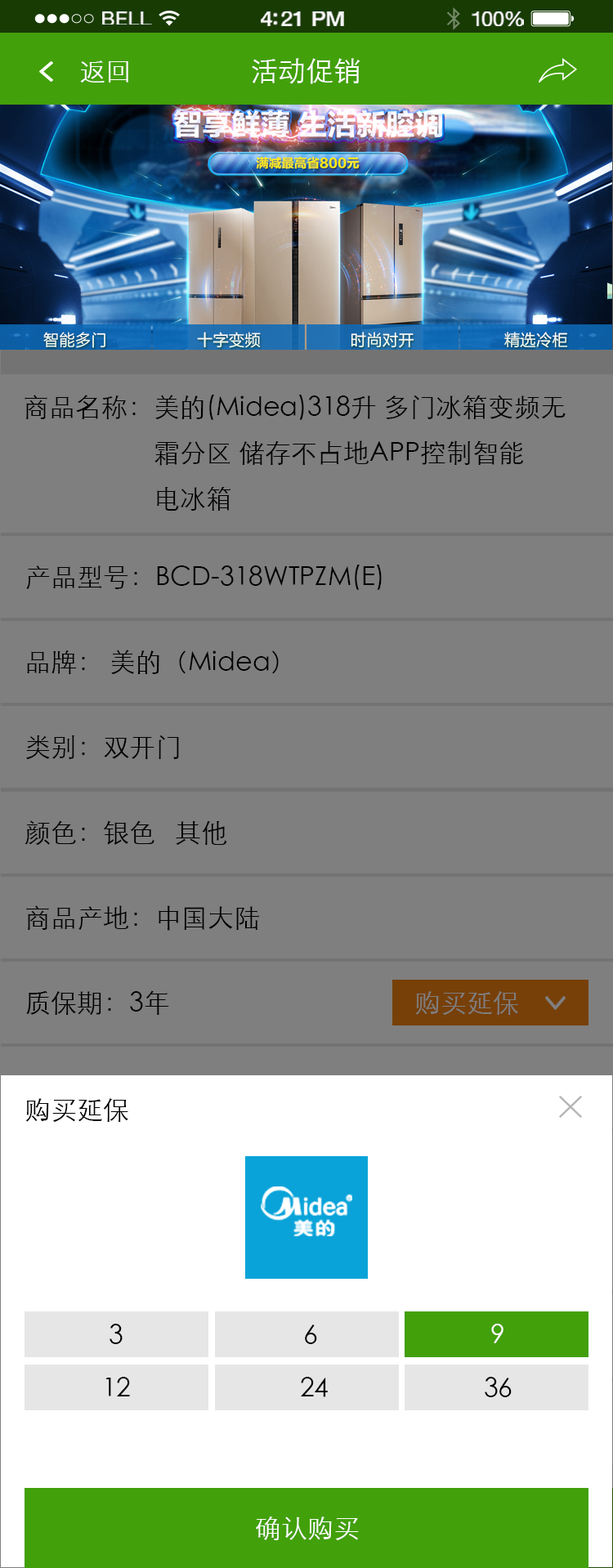
<style>
.page{position:relative;width:613px;height:1568px;background:#7f7f7f}
.page>*{position:absolute;margin:0}
.t1{font:19px "HelveticaNeue";letter-spacing:0.02em;color:#ffffff;scale:1.06 1}
.t2{font:20.7px "HelveticaNeue-Medium";letter-spacing:-0.02em;color:#ffffff;scale:1.06 1}
.t3{font:19.8px "HelveticaNeue";letter-spacing:-0.02em;color:#ffffff;scale:1.06 1}
.t4{font:26.1px "STXihei";color:#ffffff}
.t5{font:27.8px "STXihei";color:#ffffff}
.t6{font:26.1px/45.8px "STXihei";color:#000000}
.t7{font:26.1px "STXihei";color:#000000}
.t8{font:26.1px "STXihei";color:#7f7f7f}
</style>
<div class="page">
<p class="t1" style="left:102px;top:11px;width:50px;height:14px">BELL</p>
<p class="t2" style="left:261px;top:11px;width:83px;height:15px">4:21 PM</p>
<p class="t3" style="left:471px;top:11px;width:53px;height:15px">100%</p>
<p class="t4" style="left:80px;top:60px;width:48px;height:23px">返回</p>
<p class="t5" style="left:252px;top:58px;width:108px;height:26px">活动促销</p>
<p class="t6" style="left:25px;top:395px;width:540px;height:116px">商品名称：美的(Midea)318升 多门冰箱变频无<br>                    霜分区 储存不占地APP控制智能<br>                    电冰箱</p>
<p class="t7" style="left:26px;top:565px;width:356px;height:25px">产品型号：BCD-318WTPZM(E)</p>
<p class="t7" style="left:27px;top:650px;width:252px;height:25px">品牌： 美的（Midea）</p>
<p class="t7" style="left:26px;top:735px;width:153px;height:25px">类别：双开门</p>
<p class="t7" style="left:25px;top:820px;width:202px;height:26px">颜色：银色   其他</p>
<p class="t7" style="left:26px;top:905px;width:233px;height:26px">商品产地：中国大陆</p>
<p class="t7" style="left:26px;top:990px;width:143px;height:25px">质保期：3年</p>
<p class="t8" style="left:415px;top:991px;width:103px;height:24px">购买延保</p>
<p class="t7" style="left:25px;top:1098px;width:103px;height:24px">购买延保</p>
<p class="t7" style="left:109px;top:1324px;width:14px;height:20px">3</p>
<p class="t7" style="left:305px;top:1325px;width:12px;height:19px">6</p>
<p class="t4" style="left:491px;top:1324px;width:12px;height:19px">9</p>
<p class="t7" style="left:105px;top:1377px;width:25px;height:19px">12</p>
<p class="t7" style="left:301px;top:1377px;width:27px;height:20px">24</p>
<p class="t7" style="left:485px;top:1377px;width:26px;height:20px">36</p>
<p class="t4" style="left:255px;top:1516px;width:104px;height:24px">确认购买</p>
</div>
